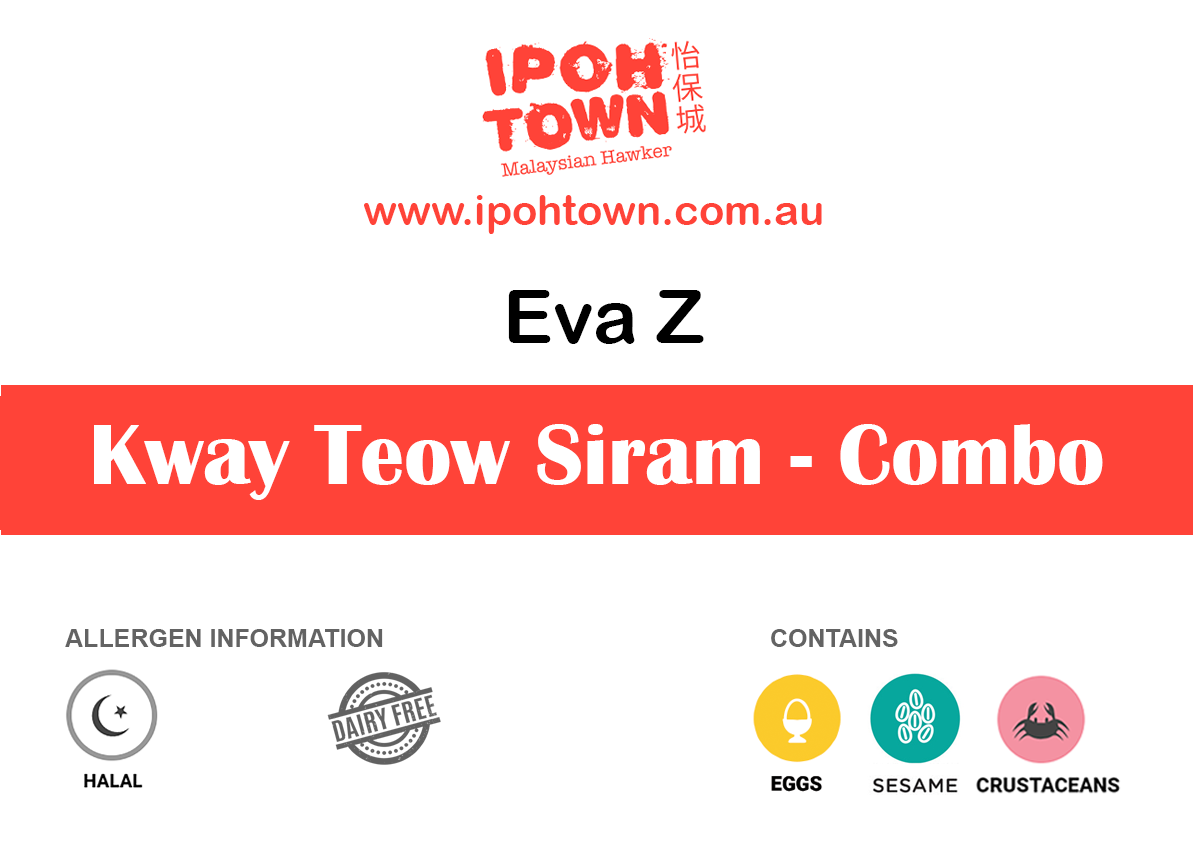
<style>
.page{position:relative;width:1193px;height:850px;background:#ffffff}
.page>*{position:absolute;margin:0}
.t1{font:41.7px "ArialRoundedMTBold";color:#ff4338}
.t2{font:75px "ArialRoundedMTBold";color:#000000}
.t3{font:87.5px "BritannicBold";color:#ffffff}
.t4{font:25px "Arial-BoldMT";color:#636363}
</style>
<div class="page">
<p class="t1" style="left:364px;top:195px;width:458px;height:39px">www.ipohtown.com.au</p>
<p class="t2" style="left:508px;top:290px;width:196px;height:54px">Eva Z</p>
<p class="t3" style="left:94px;top:424px;width:1009px;height:76px">Kway Teow Siram - Combo</p>
<p class="t4" style="left:65px;top:629px;width:318px;height:18px">ALLERGEN INFORMATION</p>
<p class="t4" style="left:771px;top:629px;width:127px;height:18px">CONTAINS</p>
</div>
